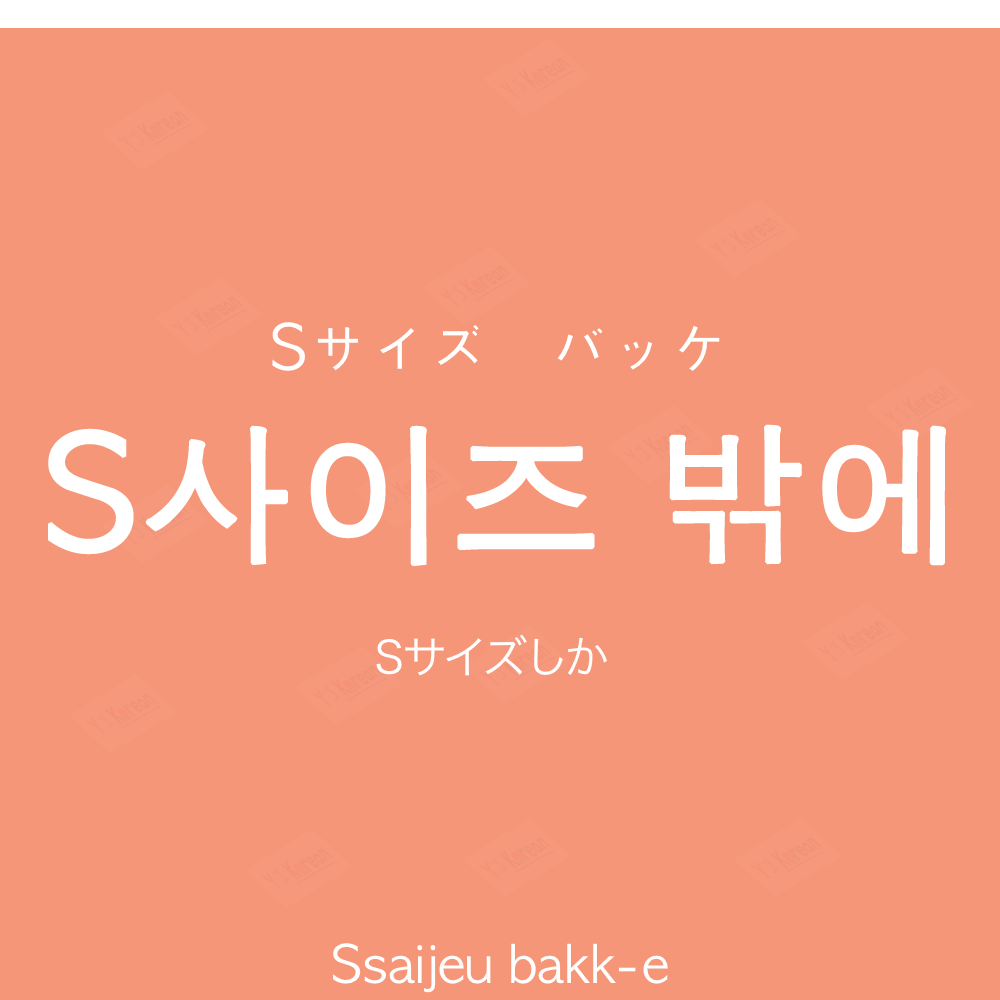
<style>
.page{position:relative;width:1000px;height:1000px;background:#f69679}
.page>*{position:absolute;margin:0}
.t1{font:60px "AppleGothic";color:#ffffff}
.t2{font:150px "AppleGothic";color:#ffffff;font-weight:bold}
.t3{font:45px "HiraKakuProN-W3";color:#ffffff}
.t4{font:50px "AppleGothic";color:#ffffff}
</style>
<div class="page">
<p class="t1" style="left:272px;top:322px;width:448px;height:49px">Sサイズ　バッケ</p>
<p class="t2" style="left:48px;top:424px;width:898px;height:143px">S사이즈 밖에</p>
<p class="t3" style="left:376px;top:634px;width:231px;height:42px">Sサイズしか</p>
<p class="t4" style="left:333px;top:943px;width:335px;height:50px">Ssaijeu bakk-e</p>
</div>
